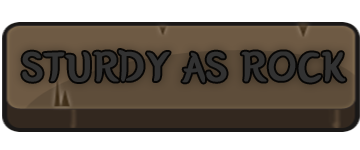
<style>
.page{position:relative;width:360px;height:150px;background:#ffffff}
.page>*{position:absolute;margin:0}
.t1{font:43.7px "BMYEONSUNG";color:#323232;text-transform:uppercase;font-weight:bold}
</style>
<div class="page">
<p class="t1" style="left:22px;top:50px;width:324px;height:33px">STURDY AS ROCK</p>
</div>
